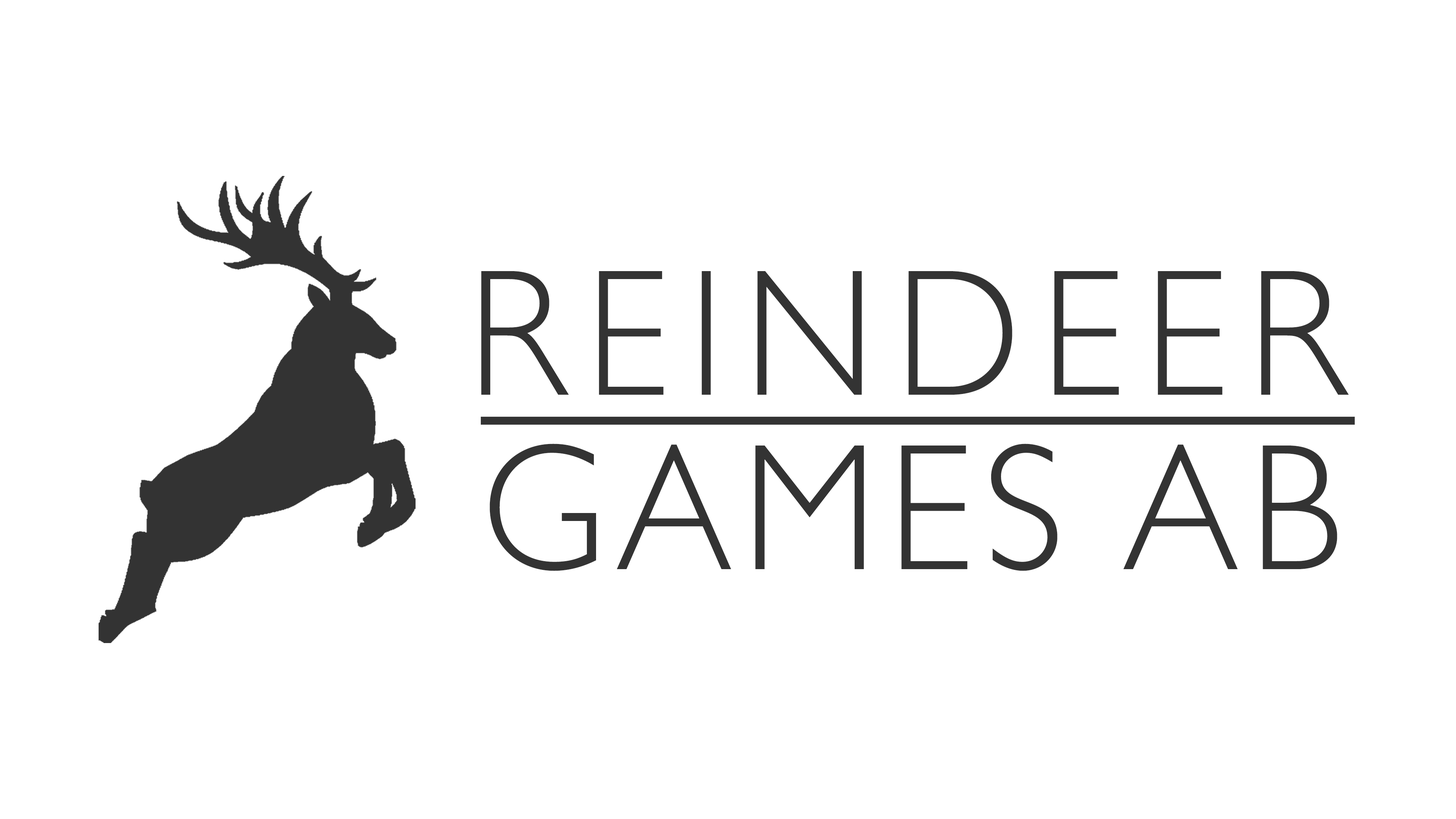
<style>
.page{position:relative;width:1456px;height:819px;background:#ffffff}
.page>*{position:absolute;margin:0}
.t1{font:181.2px "GillSans-Light";letter-spacing:0.12em;color:#333333;scale:0.94 1}
.t2{font:181.2px "GillSans-Light";letter-spacing:0.06em;color:#333333;scale:0.96 1}
</style>
<div class="page">
<p class="t1" style="left:481px;top:271px;width:868px;height:124px">REINDEER</p>
<p class="t2" style="left:489px;top:444px;width:848px;height:127px">GAMES AB</p>
</div>
